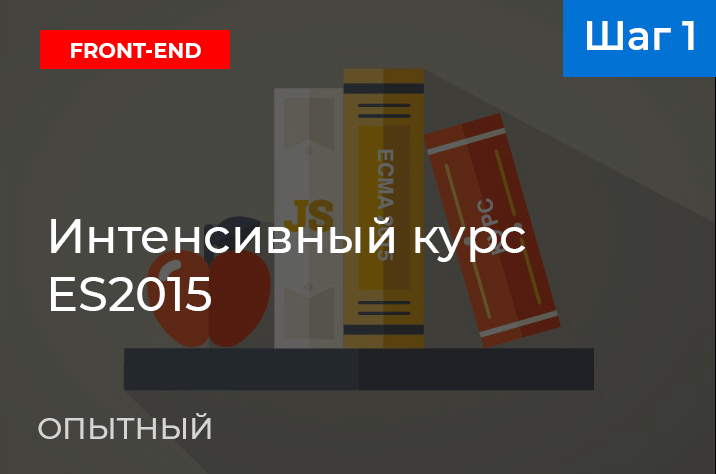
<style>
.page{position:relative;width:716px;height:474px}
.page>*{position:absolute;margin:0}
.t1{font:40px "Montserrat-SemiBold";color:#ffffff}
.t2{font:22px "Montserrat-Bold";color:#ffffff;scale:0.95 1}
.t3{font:48px "Montserrat-Medium";color:#ffffff}
.t4{font:30px "Montserrat-Medium";color:#d5d5d5}
</style>
<div class="page">
<p class="t1" style="left:587px;top:21px;width:107px;height:29px">Шаг 1</p>
<p class="t2" style="left:71px;top:43px;width:130px;height:15px">FRONT-END</p>
<p class="t3" style="left:51px;top:217px;width:474px;height:94px">Интенсивный курс <br>ES2015</p>
<p class="t4" style="left:38px;top:413px;width:173px;height:26px">ОПЫТНЫЙ</p>
</div>
